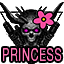
<style>
.page{position:relative;width:64px;height:64px;background:#ffffff}
.page>*{position:absolute;margin:0}
.t1{font:25.9px "HelveticaNeueCyr-Light";letter-spacing:0.12em;color:#ff79b6;font-variant:small-caps;scale:0.58 1}
</style>
<div class="page">
<p class="t1" style="left:3px;top:48px;width:59px;height:13px">princess</p>
</div>
